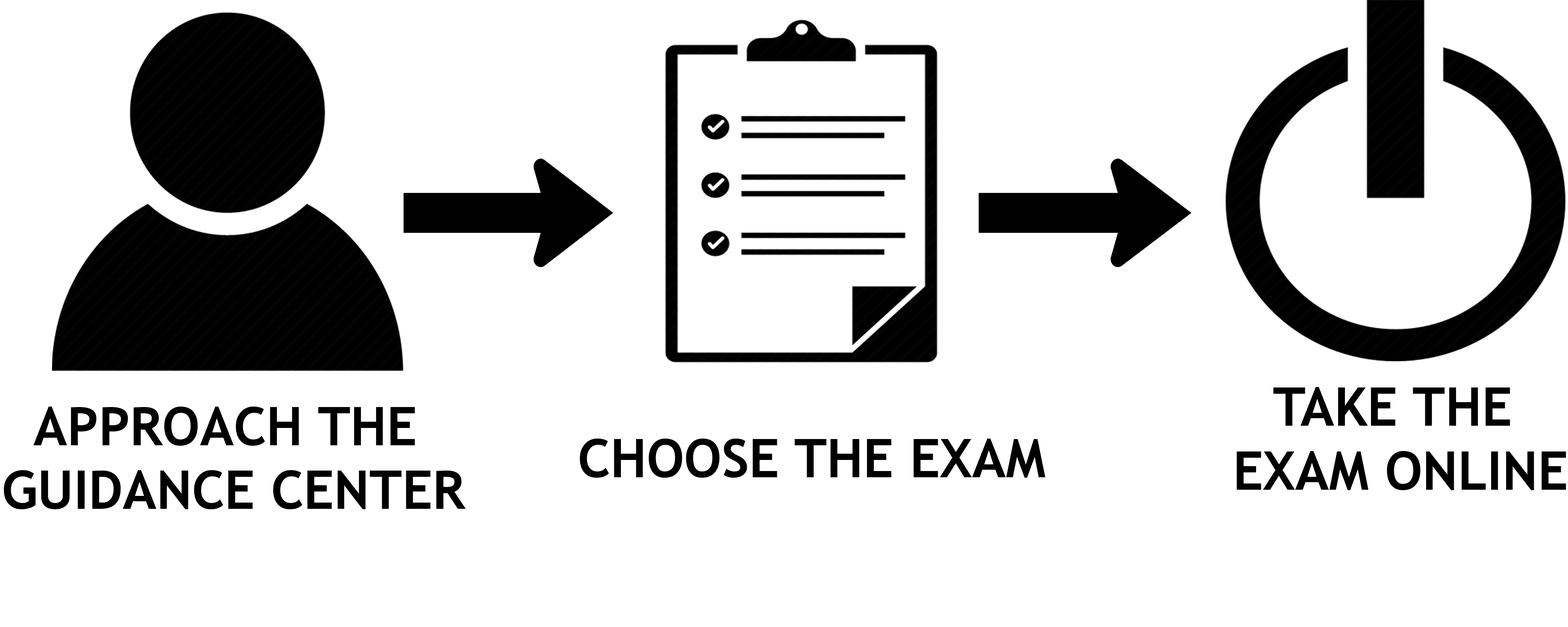
<style>
.page{position:relative;width:1568px;height:627px;background:#ffffff}
.page>*{position:absolute;margin:0}
.t1{font:53.3px "TrebuchetMS-Bold";color:#000000}
</style>
<div class="page">
<p class="t1" style="left:1236px;top:387px;width:330px;height:103px;text-align:center">TAKE THE <br>EXAM ONLINE</p>
<p class="t1" style="left:4px;top:407px;width:462px;height:102px;text-align:center">APPROACH THE <br>GUIDANCE CENTER</p>
<p class="t1" style="left:580px;top:439px;width:465px;height:39px">CHOOSE THE EXAM</p>
</div>
